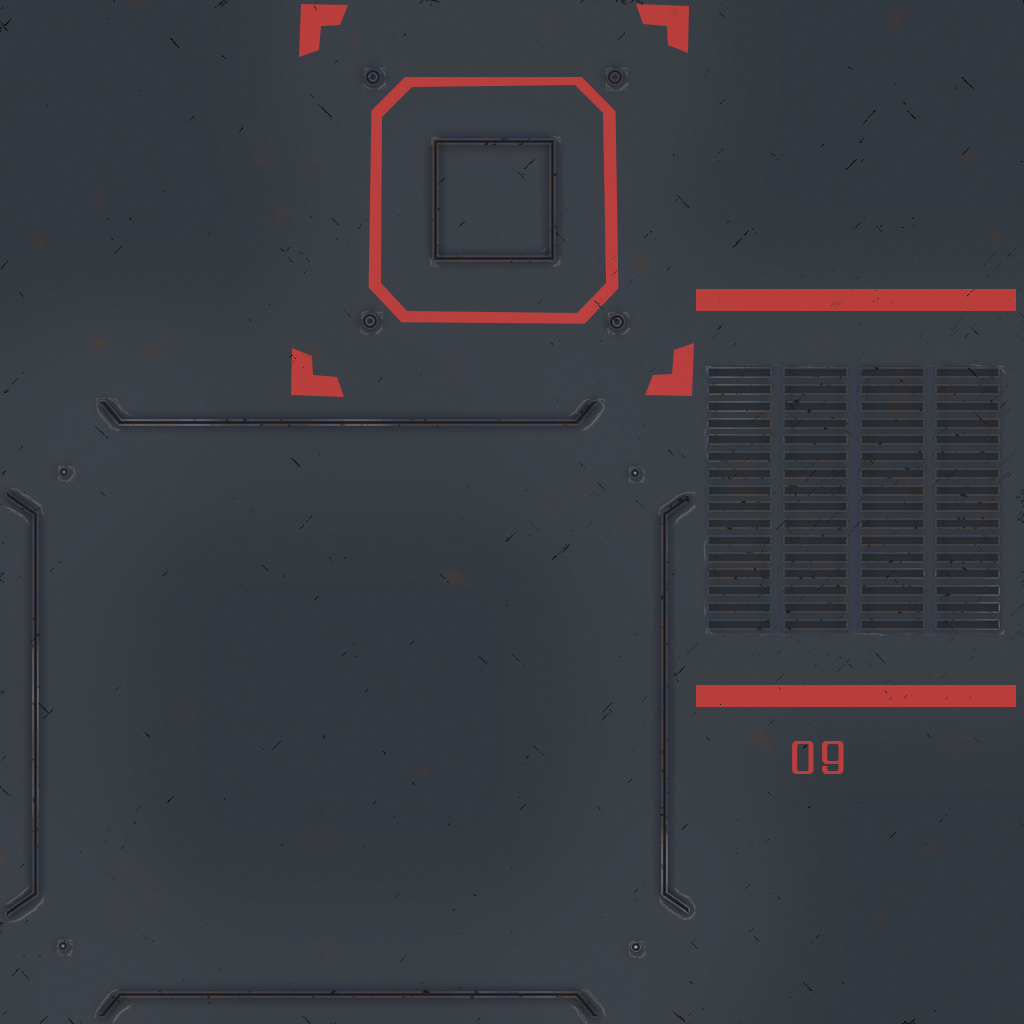
<style>
.page{position:relative;width:1024px;height:1024px}
.page>*{position:absolute;margin:0}
.t1{font:75.9px "IrisUPC";letter-spacing:0.035em;color:#b93f3e;text-transform:uppercase}
</style>
<div class="page">
<p class="t1" style="left:792px;top:741px;width:52px;height:33px">09</p>
</div>
